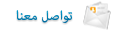
<style>
.page{position:relative;width:115px;height:32px;background:#ffffff}
.page>*{position:absolute;margin:0}
.t1{font:19px "AdobeArabic-Regular";color:#007db0}
</style>
<div class="page">
<p class="t1" style="left:16px;top:10px;width:56px;height:13px">تواصل معنا</p>
</div>
